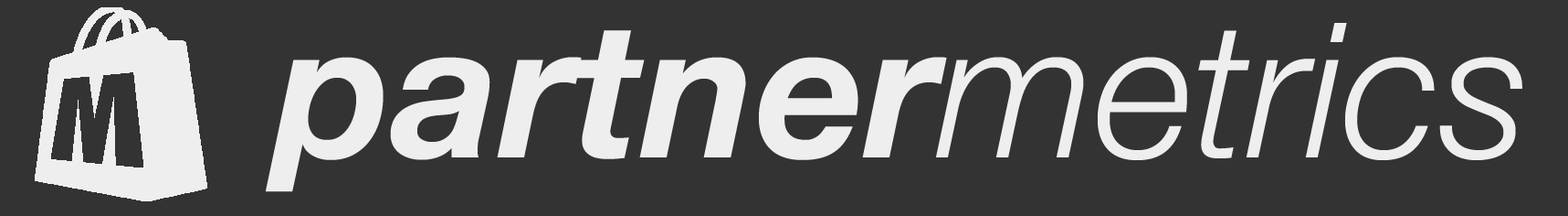
<style>
.page{position:relative;width:1568px;height:216px;background:#333333}
.page>*{position:absolute;margin:0}
.t1{font:188.1px "HelveticaNeue-BoldItalic";color:#eeeeee}
.t2{font:188.1px "HelveticaNeue-LightItalic";color:#eeeeee}
</style>
<div class="page">
<p class="t1" style="left:265px;top:23px;width:1257px;height:169px">partner<span class="t2">metrics</span></p>
</div>
